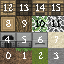
<style>
.page{position:relative;width:64px;height:64px}
.page>*{position:absolute;margin:0}
.t1{font:10px "Caslon";color:#ffffff}
.t2{font:10px "Caslon";color:#000000}
</style>
<div class="page">
<p class="t1" style="left:4px;top:4px;width:9px;height:7px">12</p>
<p class="t1" style="left:20px;top:4px;width:9px;height:7px">13</p>
<p class="t1" style="left:36px;top:4px;width:9px;height:7px">14</p>
<p class="t1" style="left:52px;top:4px;width:8px;height:7px">15</p>
<p class="t1" style="left:6px;top:20px;width:5px;height:7px">8</p>
<p class="t1" style="left:22px;top:20px;width:5px;height:7px">9</p>
<p class="t2" style="left:36px;top:20px;width:9px;height:7px">10</p>
<p class="t2" style="left:52px;top:20px;width:8px;height:7px">11</p>
<p class="t1" style="left:5px;top:36px;width:5px;height:7px">4</p>
<p class="t1" style="left:22px;top:36px;width:4px;height:7px">5</p>
<p class="t1" style="left:38px;top:36px;width:5px;height:7px">6</p>
<p class="t1" style="left:55px;top:36px;width:3px;height:7px">7</p>
<p class="t1" style="left:6px;top:52px;width:5px;height:7px">0</p>
<p class="t1" style="left:23px;top:52px;width:3px;height:7px">1</p>
<p class="t1" style="left:39px;top:52px;width:4px;height:7px">2</p>
<p class="t1" style="left:54px;top:52px;width:5px;height:7px">3</p>
</div>
